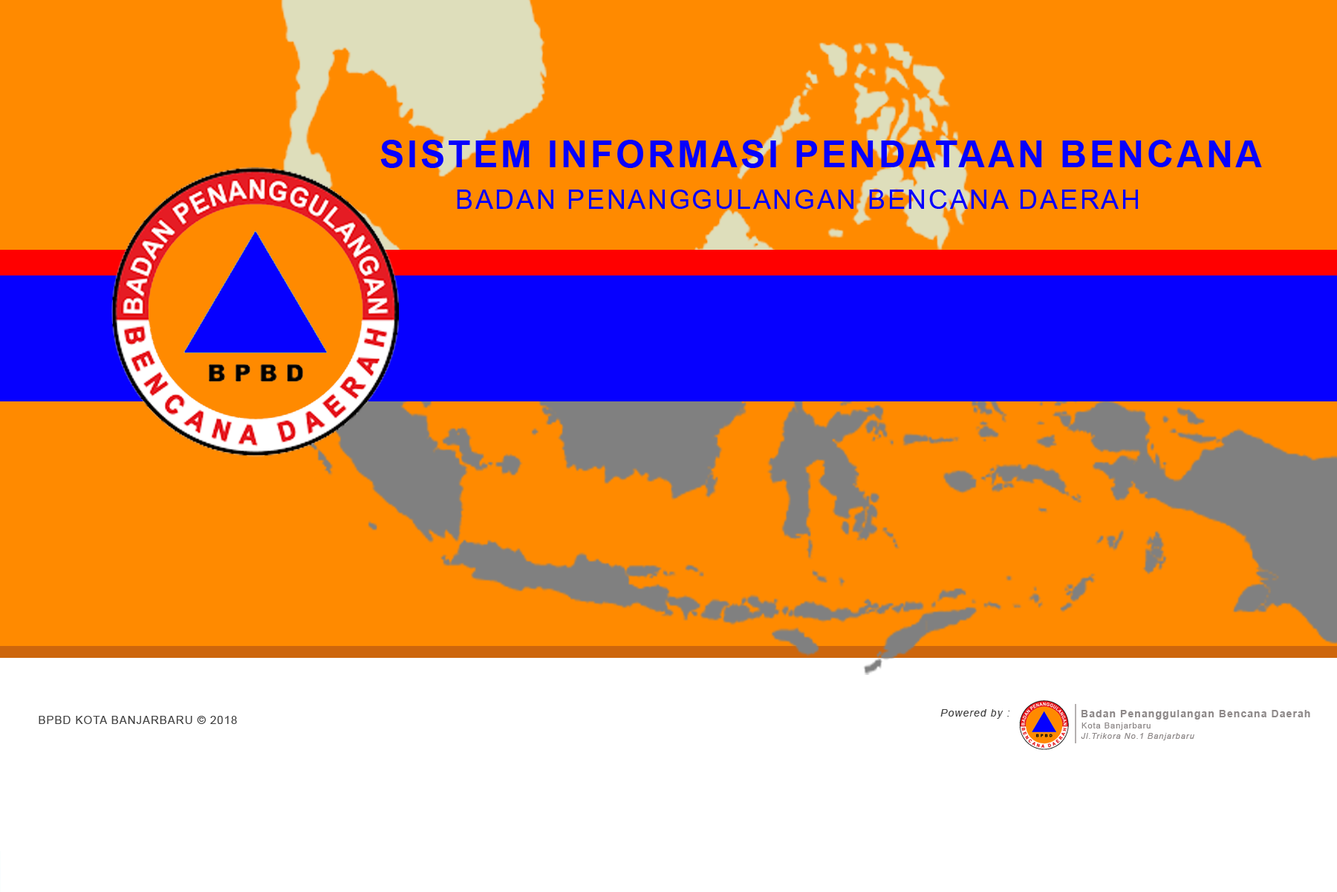
<style>
.page{position:relative;width:1337px;height:892px;background:#ff8a00}
.page>*{position:absolute;margin:0}
.t1{font:37.2px "Arial-BoldMT";letter-spacing:0.075em;color:#0600ff}
.t2{font:26.7px "ArialMT";letter-spacing:0.075em;color:#0600ff}
.t3{font:10.4px "Arial-ItalicMT";letter-spacing:0.075em;color:#444444}
.t4{font:10.4px "Arial-BoldMT";letter-spacing:0.075em;color:#8e8989}
.t5{font:11.1px "ArialMT";letter-spacing:0.075em;color:#444444}
.t6{font:8.4px "ArialMT";letter-spacing:0.075em;color:#8e8989}
.t7{font:8.4px "Arial-ItalicMT";letter-spacing:0.075em;color:#8e8989}
</style>
<div class="page">
<p class="t1" style="left:380px;top:140px;width:882px;height:28px">SISTEM INFORMASI PENDATAAN BENCANA</p>
<p class="t2" style="left:457px;top:189px;width:681px;height:20px">BADAN PENANGGULANGAN BENCANA DAERAH</p>
<p class="t3" style="left:941px;top:709px;width:69px;height:9px">Powered by :</p>
<p class="t4" style="left:1082px;top:710px;width:229px;height:9px">Badan Penanggulangan Bencana Daerah</p>
<p class="t5" style="left:39px;top:716px;width:198px;height:8px">BPBD KOTA BANJARBARU © 2018</p>
<p class="t6" style="left:1082px;top:722px;width:69px;height:8px">Kota Banjarbaru</p>
<p class="t7" style="left:1081px;top:733px;width:114px;height:7px">Jl.Trikora No.1 Banjarbaru</p>
</div>
